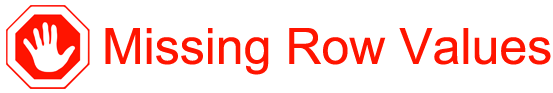
<style>
.page{position:relative;width:553px;height:93px;background:#ffffff}
.page>*{position:absolute;margin:0}
.t1{font:50px "ArialMT";color:#ff1400}
</style>
<div class="page">
<p class="t1" style="left:105px;top:28px;width:446px;height:47px">Missing Row Values</p>
</div>
